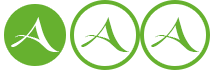
<style>
.page{position:relative;width:210px;height:70px;background:#ffffff}
.page>*{position:absolute;margin:0}
.t1{font:39.1px "BlackChancery";color:#ffffff;scale:1.23 1}
.t2{font:39.1px "BlackChancery";color:#66b12f;scale:1.23 1}
</style>
<div class="page">
<p class="t1" style="left:11px;top:17px;width:48px;height:35px">A</p>
<p class="t2" style="left:81px;top:17px;width:48px;height:35px">A</p>
<p class="t2" style="left:151px;top:17px;width:48px;height:35px">A</p>
</div>
